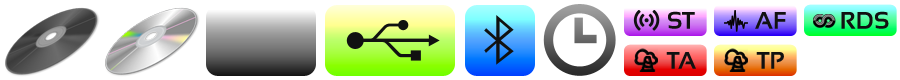
<style>
.page{position:relative;width:900px;height:80px;background:#ffffff}
.page>*{position:absolute;margin:0}
.t1{font:24px "Sansation-Bold";color:#111111}
</style>
<div class="page">
<p class="t1" style="left:668px;top:11px;width:27px;height:18px">ST</p>
<p class="t1" style="left:755px;top:12px;width:31px;height:17px">AF</p>
<p class="t1" style="left:841px;top:11px;width:48px;height:18px">RDS</p>
<p class="t1" style="left:666px;top:52px;width:30px;height:17px">TA</p>
<p class="t1" style="left:756px;top:52px;width:28px;height:17px">TP</p>
</div>
